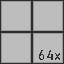
<style>
.page{position:relative;width:64px;height:64px;background:#bdbdbd}
.page>*{position:absolute;margin:0}
.t1{font:14.4px "Bahnschrift";color:#2d2d2d}
</style>
<div class="page">
<p class="t1" style="left:39px;top:50px;width:21px;height:10px">64x</p>
</div>
